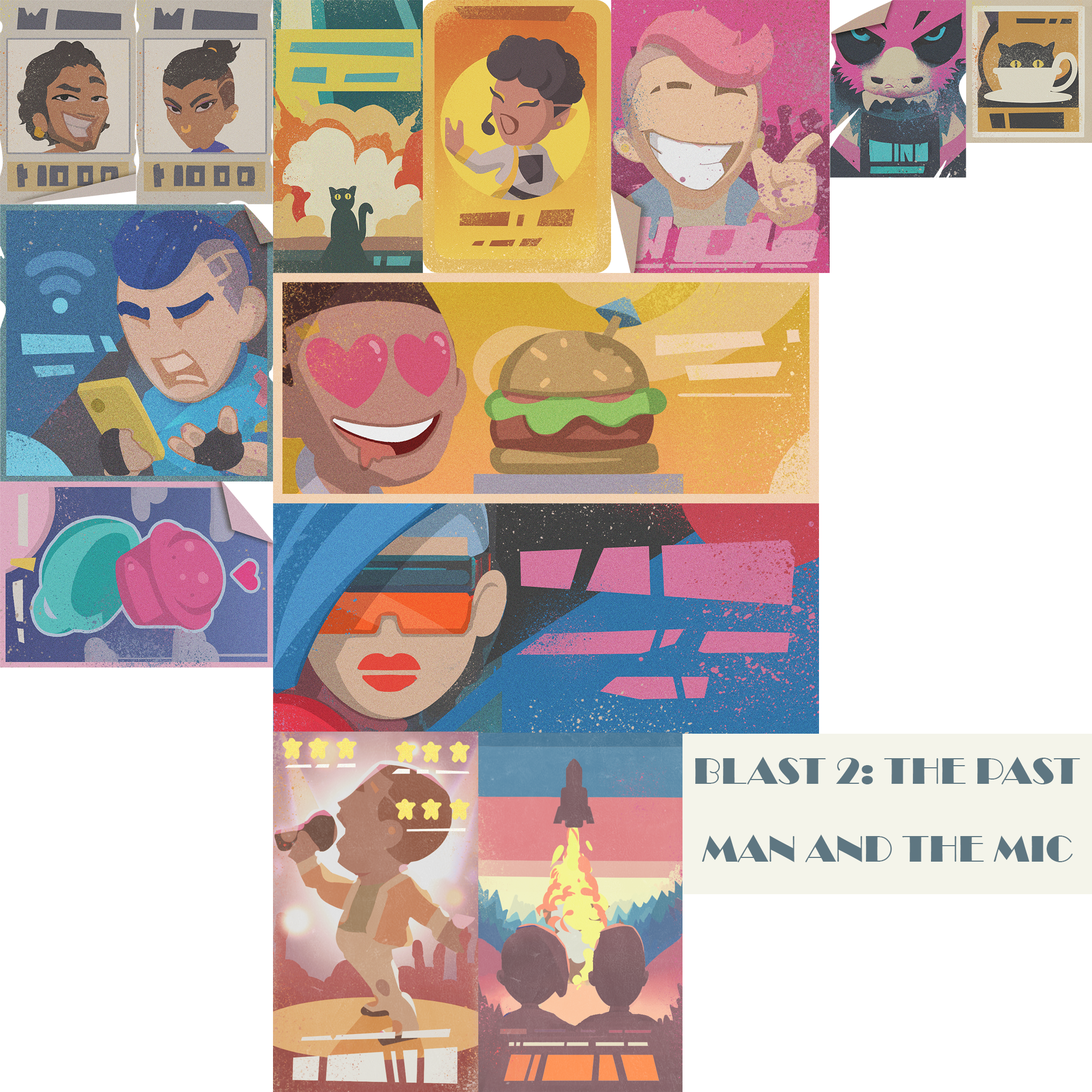
<style>
.page{position:relative;width:1092px;height:1092px;background:#ffffff}
.page>*{position:absolute;margin:0}
.t1{font:38.4px "Broadway";color:#5e7681}
</style>
<div class="page">
<p class="t1" style="left:695px;top:757px;width:385px;height:27px">BLAST 2: THE PAST</p>
<p class="t1" style="left:702px;top:834px;width:371px;height:28px">MAN AND THE MIC</p>
</div>
